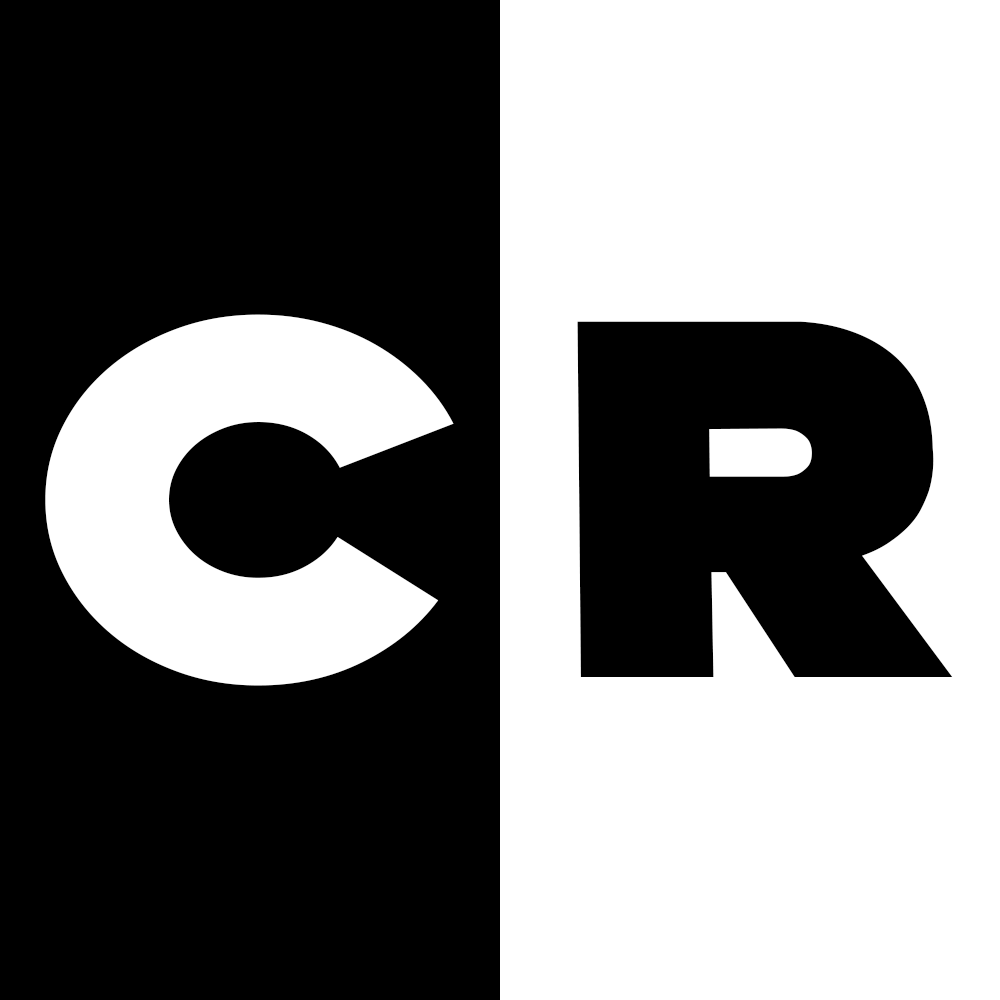
<style>
.page{position:relative;width:1000px;height:1000px;background:#000000}
.page>*{position:absolute;margin:0}
.t1{font:495px "CartoonSlam";letter-spacing:0.06em;color:#ffffff;scale:1.15 1}
.t2{font:495px "CartoonSlam";letter-spacing:0.06em;color:#000000;scale:1.15 1}
</style>
<div class="page">
<p class="t1" style="left:45px;top:314px;width:409px;height:372px">C</p>
<p class="t2" style="left:577px;top:321px;width:376px;height:356px">r</p>
</div>
